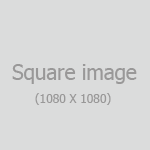
<style>
.page{position:relative;width:150px;height:150px;background:#dbdcdc}
.page>*{position:absolute;margin:0}
.t1{font:22.4px "Tahoma";color:#999898;scale:0.92 1}
.t2{font:11.7px "Tahoma";color:#999898}
</style>
<div class="page">
<p class="t1" style="left:12px;top:64px;width:125px;height:20px">Square image</p>
<p class="t2" style="left:35px;top:93px;width:76px;height:12px">(1080 X 1080)</p>
</div>
